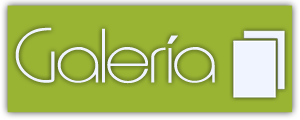
<style>
.page{position:relative;width:300px;height:120px;background:#99b433}
.page>*{position:absolute;margin:0}
.t1{font:90px "Metro-Normal";color:#eff4ff}
</style>
<div class="page">
<p class="t1" style="left:15px;top:27px;width:200px;height:57px">Galería</p>
</div>
